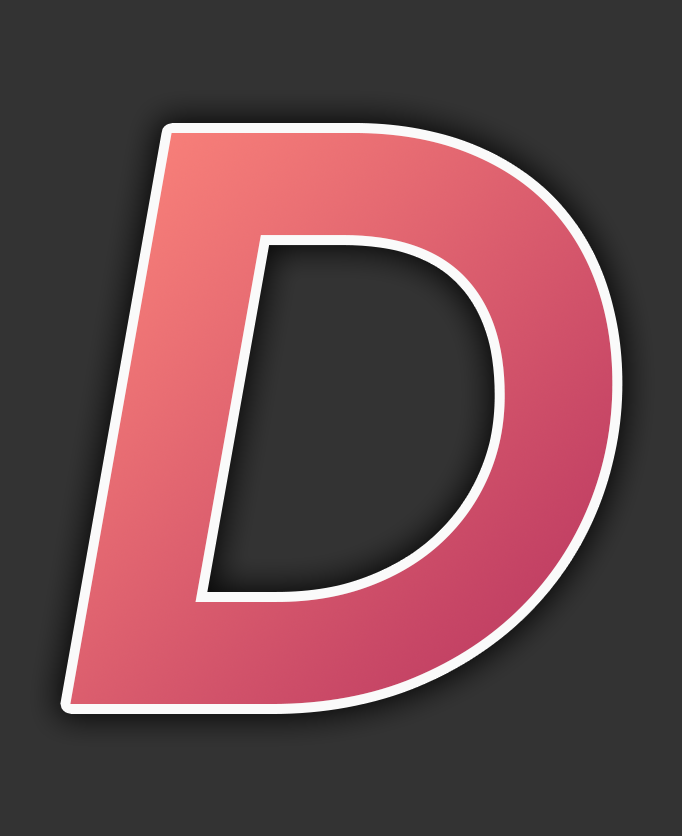
<style>
.page{position:relative;width:682px;height:836px;background:#333333}
.page>*{position:absolute;margin:0}
.t1{font:797px "ProductSans-BoldItalic";letter-spacing:-0.22em;color:#db5e6e}
</style>
<div class="page">
<p class="t1" style="left:70px;top:133px;width:543px;height:571px">D</p>
</div>
